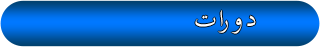
<style>
.page{position:relative;width:320px;height:47px}
.page>*{position:absolute;margin:0}
.t1{font:33px "TraditionalArabic";letter-spacing:-0.08em;color:#fffefe}
</style>
<div class="page">
<p class="t1" style="left:195px;top:10px;width:61px;height:24px">د و را ت</p>
</div>
